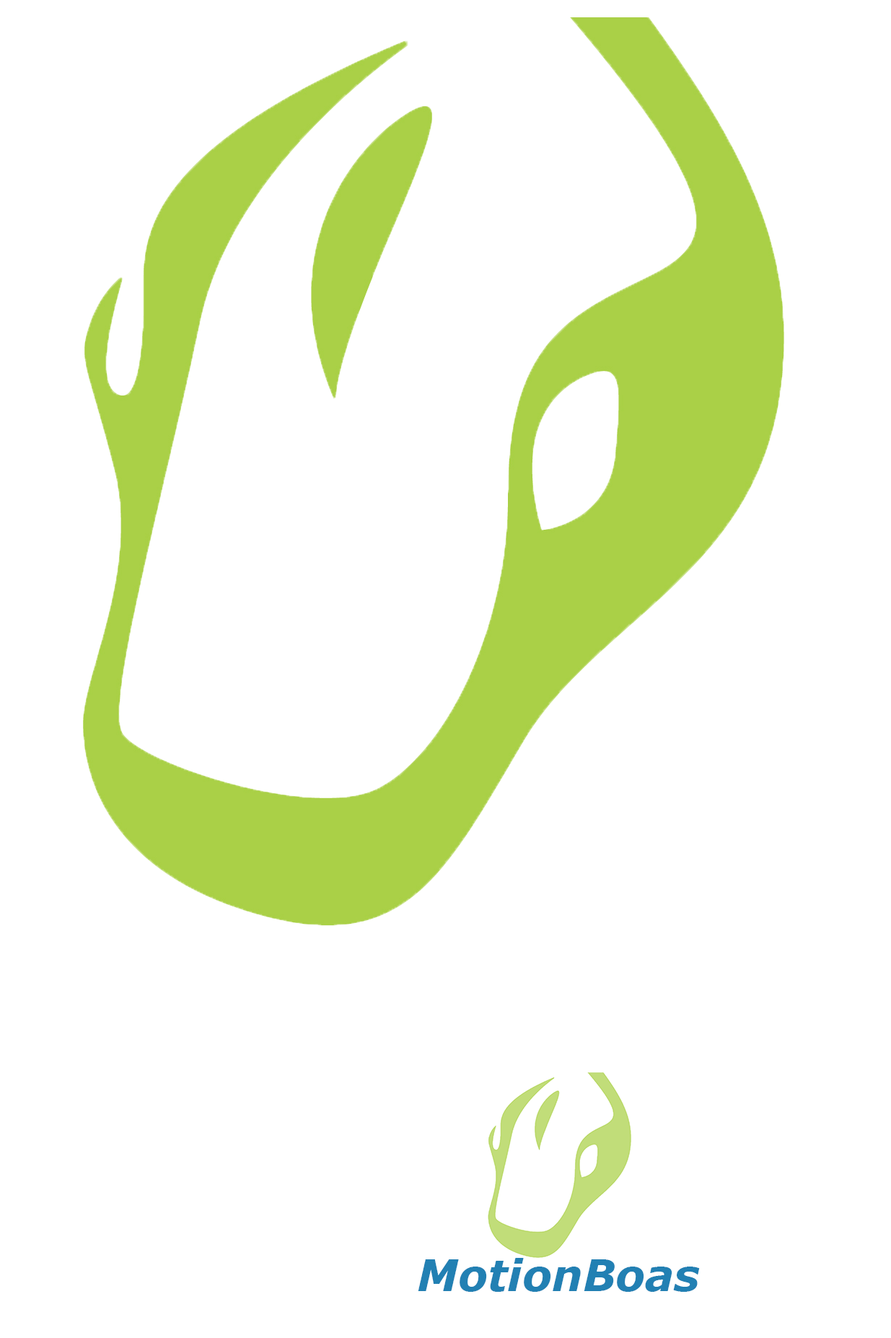
<style>
.page{position:relative;width:891px;height:1338px;background:#ffffff}
.page>*{position:absolute;margin:0}
.t1{font:43.3px "Verdana-BoldItalic";color:#2280b3}
</style>
<div class="page">
<p class="t1" style="left:418px;top:1258px;width:282px;height:34px">MotionBoas</p>
</div>
